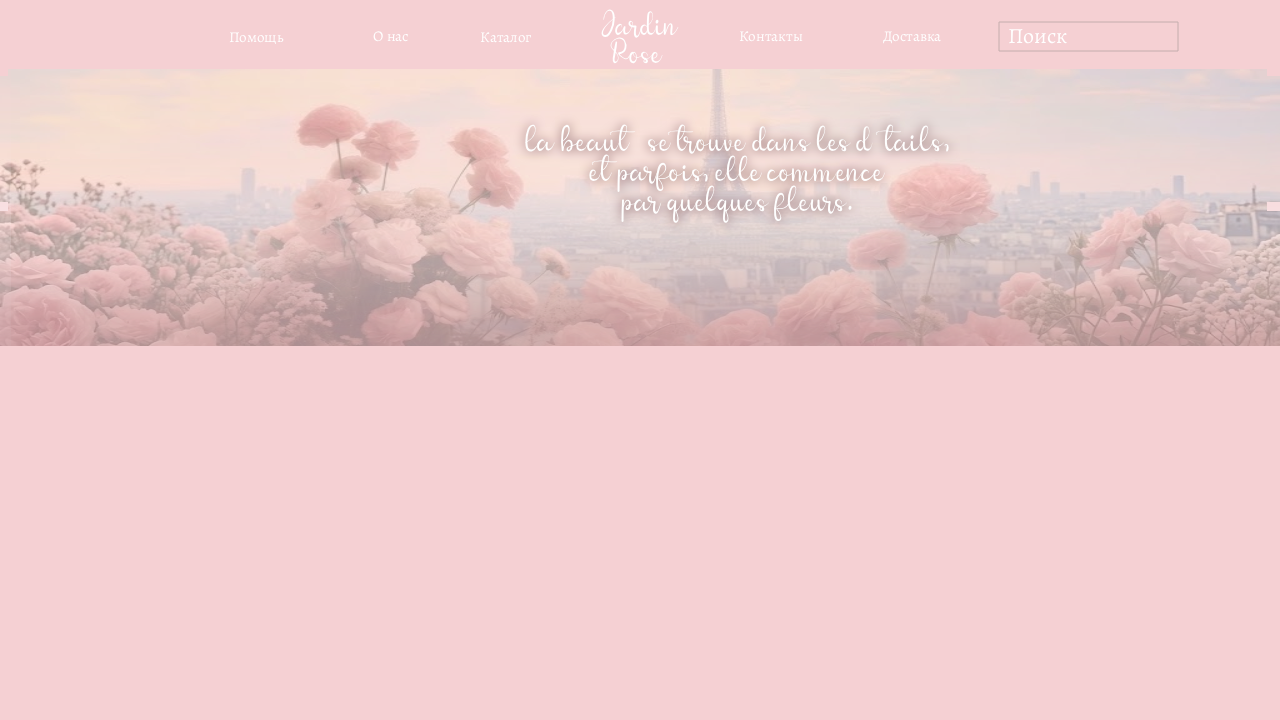
<style>
.page{position:relative;width:1280px;height:720px;background:#f5d0d3}
.page>*{position:absolute;margin:0}
.t1{font:24px "lolita";color:#ffffff}
.t2{font:21.7px "AlegreyaRoman-Regular";color:#ffffff}
.t3{font:15px "AlegreyaRoman-Regular";color:#ffffff}
.t4{font:25.1px "lolita";color:#ffffff}
</style>
<div class="page">
<p class="t1" style="left:601px;top:8px;width:78px;height:56px;text-align:center">Jardin<br>Rose</p>
<p class="t2" style="left:1009px;top:29px;width:58px;height:15px">Поиск</p>
<p class="t3" style="left:229px;top:32px;width:55px;height:13px">Помощь</p>
<p class="t3" style="left:373px;top:31px;width:35px;height:11px">О нас</p>
<p class="t3" style="left:480px;top:32px;width:52px;height:11px">Каталог</p>
<p class="t3" style="left:739px;top:31px;width:64px;height:11px">Контакты</p>
<p class="t3" style="left:883px;top:31px;width:58px;height:13px">Доставка</p>
<p class="t4" style="left:525px;top:124px;width:424px;height:100px;text-align:center">La beauté se trouve dans les détails,<br>et parfois, elle commence<br>par quelques fleurs.</p>
</div>
